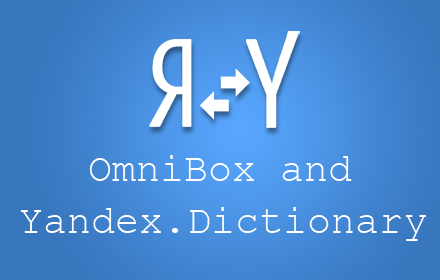
<style>
.page{position:relative;width:440px;height:280px}
.page>*{position:absolute;margin:0}
.t1{font:40px "CourierNewPSMT";color:#ffffff}
</style>
<div class="page">
<p class="t1" style="left:89px;top:155px;width:263px;height:26px">OmniBox and</p>
<p class="t1" style="left:20px;top:207px;width:406px;height:34px">Yandex.Dictionary</p>
</div>
